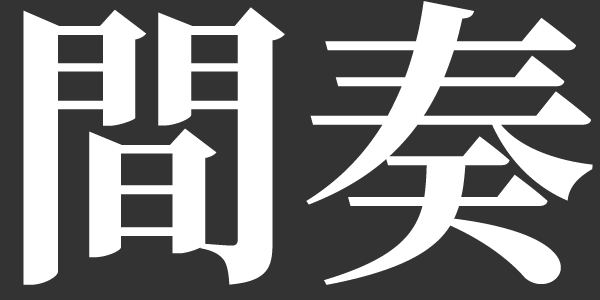
<style>
.page{position:relative;width:600px;height:300px;background:#333333}
.page>*{position:absolute;margin:0}
.t1{font:300px "SourceHanSerifSC-Bold";color:#ffffff}
</style>
<div class="page">
<p class="t1" style="left:23px;top:1px;width:570px;height:284px">間奏</p>
</div>
